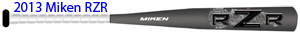
<style>
.page{position:relative;width:300px;height:34px;background:#ffffff}
.page>*{position:absolute;margin:0}
.t1{font:14px "MyriadPro-Regular";color:#0000ff}
</style>
<div class="page">
<p class="t1" style="left:14px;top:2px;width:94px;height:10px">2013 Miken RZR</p>
</div>
